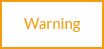
<style>
.page{position:relative;width:104px;height:49px;background:#ffffff}
.page>*{position:absolute;margin:0}
.t1{font:15px "Lato-Regular";color:#f39c12}
</style>
<div class="page">
<p class="t1" style="left:24px;top:18px;width:57px;height:14px">Warning</p>
</div>
